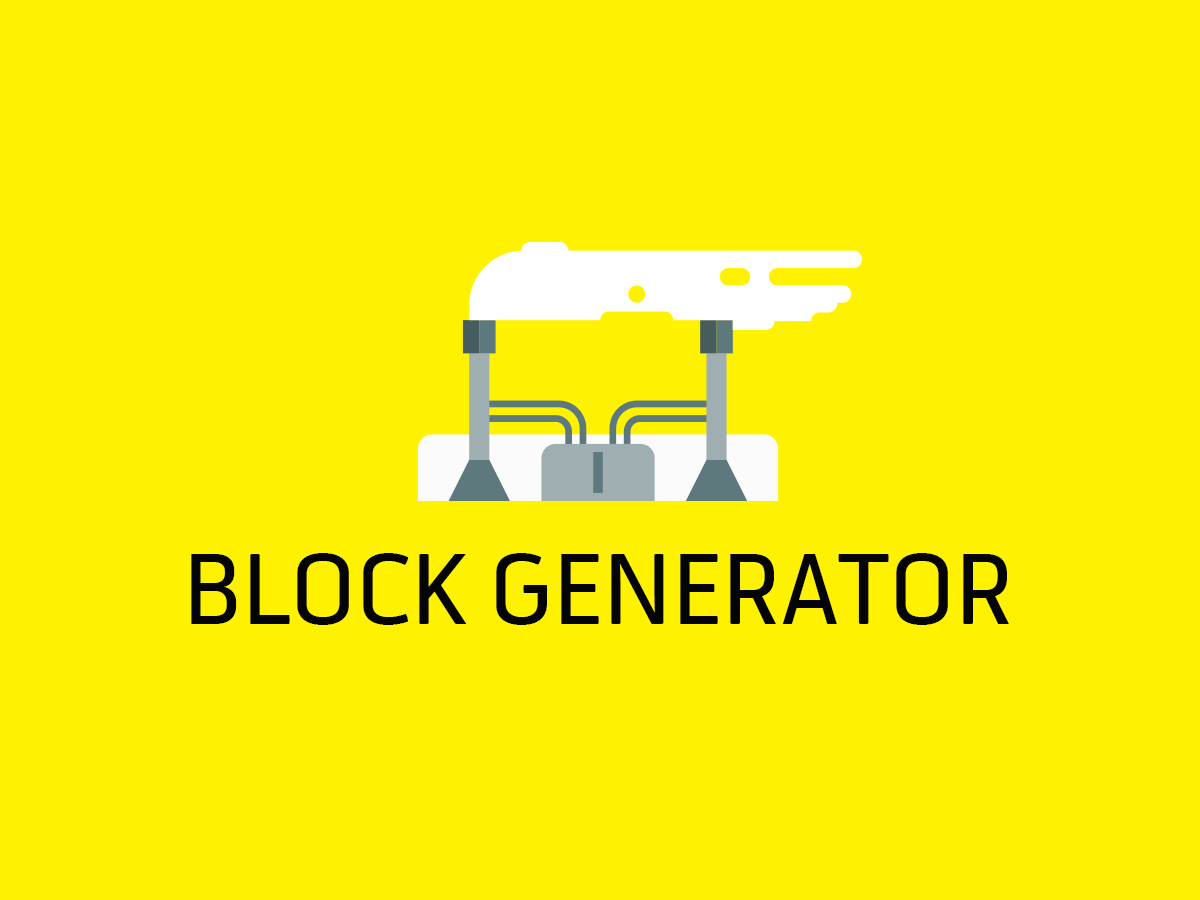
<style>
.page{position:relative;width:1200px;height:900px;background:#fff200}
.page>*{position:absolute;margin:0}
.t1{font:96px "Telenor";color:#040404}
</style>
<div class="page">
<p class="t1" style="left:191px;top:553px;width:818px;height:72px">BLOCK GENERATOR</p>
</div>
